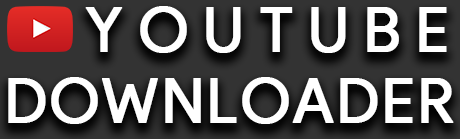
<style>
.page{position:relative;width:460px;height:139px}
.page>*{position:absolute;margin:0}
.t1{font:60.9px "ProductSans-Regular";letter-spacing:0.24em;color:#ffffff;font-weight:bold}
.t2{font:60.9px "ProductSans-Regular";letter-spacing:0.025em;color:#ffffff;font-weight:bold}
</style>
<div class="page">
<p class="t1" style="left:85px;top:6px;width:362px;height:47px">YOUTUBE</p>
<p class="t2" style="left:8px;top:77px;width:446px;height:47px">DOWNLOADER</p>
</div>
